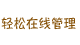
<style>
.page{position:relative;width:80px;height:45px;background:#ffffff}
.page>*{position:absolute;margin:0}
.t1{font:12.5px "HannotateSC-W7";color:#855005}
</style>
<div class="page">
<p class="t1" style="left:1px;top:17px;width:75px;height:13px">轻松在线管理</p>
</div>
